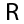
<style>
.page{position:relative;width:24px;height:24px;background:#ffffff}
.page>*{position:absolute;margin:0}
.t1{font:25px "MyriadPro-Regular";color:#000000}
</style>
<div class="page">
<p class="t1" style="left:7px;top:3px;width:12px;height:17px">R</p>
</div>
